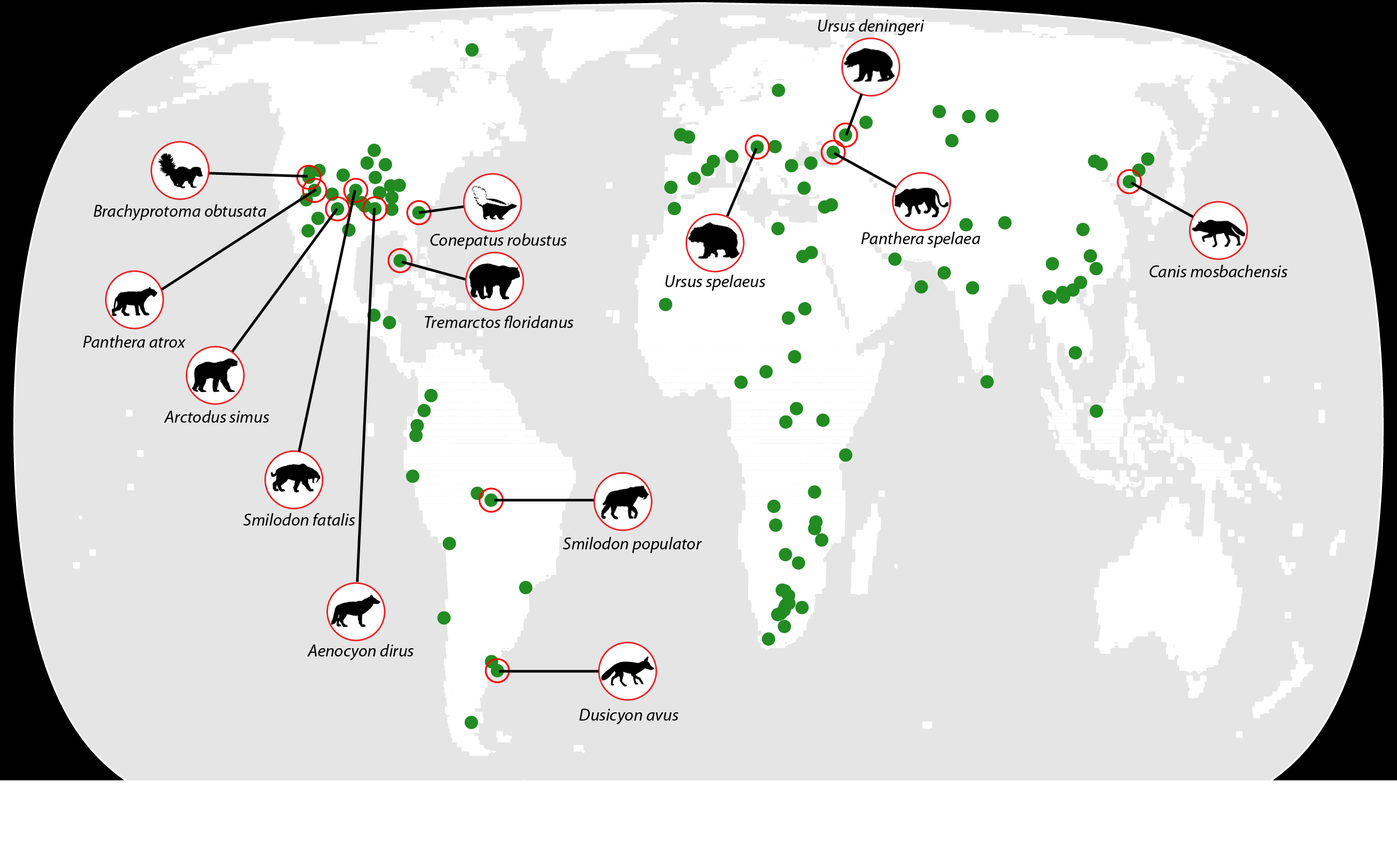
<style>
.page{position:relative;width:1397px;height:853px;background:#e5e5e5}
.page>*{position:absolute;margin:0}
.t1{font:17.3px "MyriadPro-It";color:#000000}
</style>
<div class="page">
<p class="t1" style="left:818px;top:19px;width:106px;height:16px">Ursus deningeri</p>
<p class="t1" style="left:94px;top:204px;width:173px;height:17px">Brachyprotoma obtusata</p>
<p class="t1" style="left:431px;top:233px;width:136px;height:16px">Conepatus robustus</p>
<p class="t1" style="left:861px;top:232px;width:120px;height:16px">Panthera spelaea</p>
<p class="t1" style="left:1150px;top:265px;width:138px;height:12px">Canis mosbachensis</p>
<p class="t1" style="left:666px;top:275px;width:100px;height:16px">Ursus spelaeus</p>
<p class="t1" style="left:425px;top:316px;width:149px;height:12px">Tremarctos floridanus</p>
<p class="t1" style="left:83px;top:335px;width:103px;height:13px">Panthera atrox</p>
<p class="t1" style="left:164px;top:410px;width:106px;height:13px">Arctodus simus</p>
<p class="t1" style="left:243px;top:513px;width:113px;height:13px">Smilodon fatalis</p>
<p class="t1" style="left:563px;top:537px;width:139px;height:16px">Smilodon populator</p>
<p class="t1" style="left:307px;top:644px;width:107px;height:17px">Aenocyon dirus</p>
<p class="t1" style="left:579px;top:709px;width:100px;height:16px">Dusicyon avus</p>
</div>
